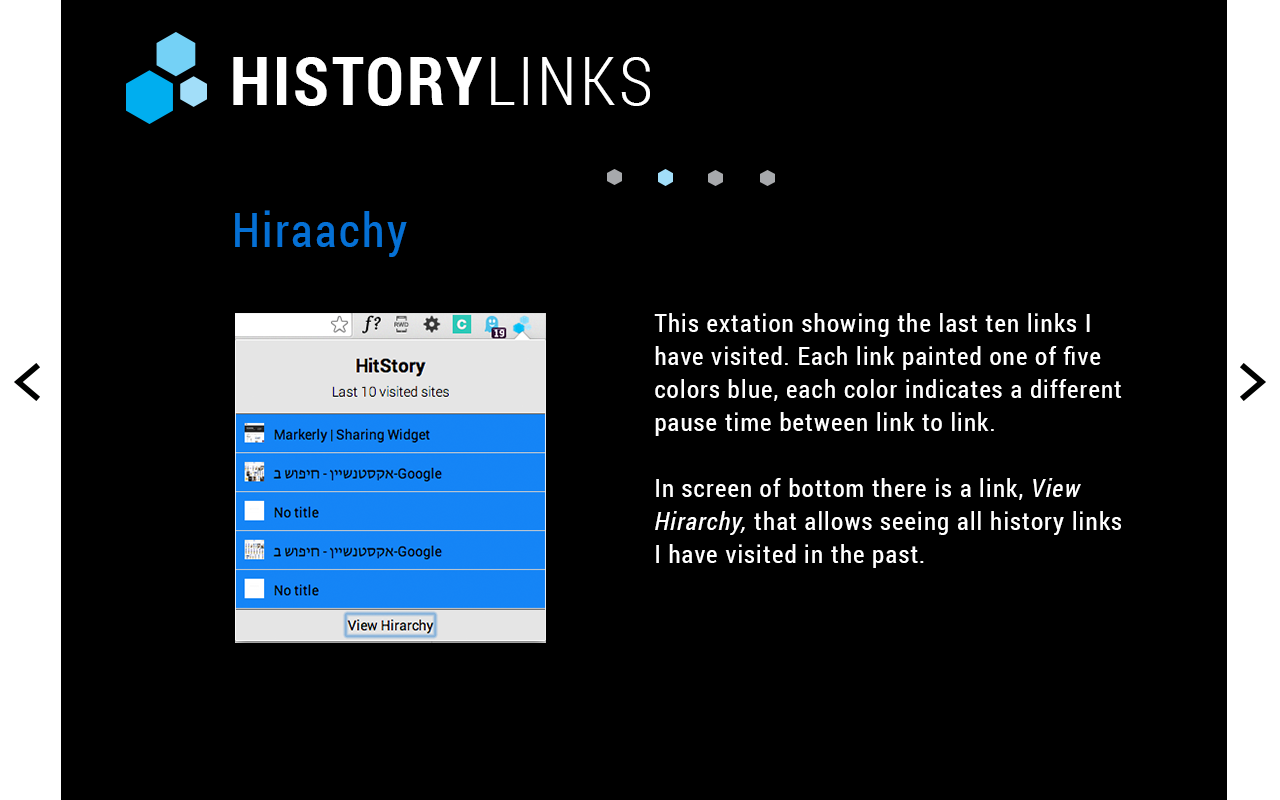
<style>
.page{position:relative;width:1280px;height:800px;background:#000000}
.page>*{position:absolute;margin:0}
.t1{font:67.1px "RobotoCondensed-Bold";letter-spacing:0.05em;color:#ffffff}
.t2{font:67.1px "RobotoCondensed-Light";letter-spacing:0.05em;color:#ffffff}
.t3{font:46.9px "RobotoCondensed-Regular";letter-spacing:0.05em;color:#0570d4}
.t4{font:25.3px/33.1px "RobotoCondensed-Regular";letter-spacing:0.05em;color:#ffffff}
.t5{font:25.3px/32.5px "RobotoCondensed-Regular";letter-spacing:0.05em;color:#0570d4}
.t6{font:25.3px/33.1px "RobotoCondensed-Italic";letter-spacing:0.05em;color:#ffffff}
</style>
<div class="page">
<p class="t1" style="left:233px;top:57px;width:417px;height:49px">HISTORY<span class="t2">LINKS</span></p>
<p class="t3" style="left:235px;top:210px;width:172px;height:47px">Hiraachy</p>
<p class="t4" style="left:654px;top:313px;width:468px;height:255px"><span class="t5"><br></span>This extation showing the last ten links I have visited. Each link painted one of five colors blue, each color indicates a different pause time between link to link. <br><br>In screen of bottom there is a link, <span class="t6">View Hirarchy,</span> that allows seeing all history links I have visited in the past.</p>
</div>
